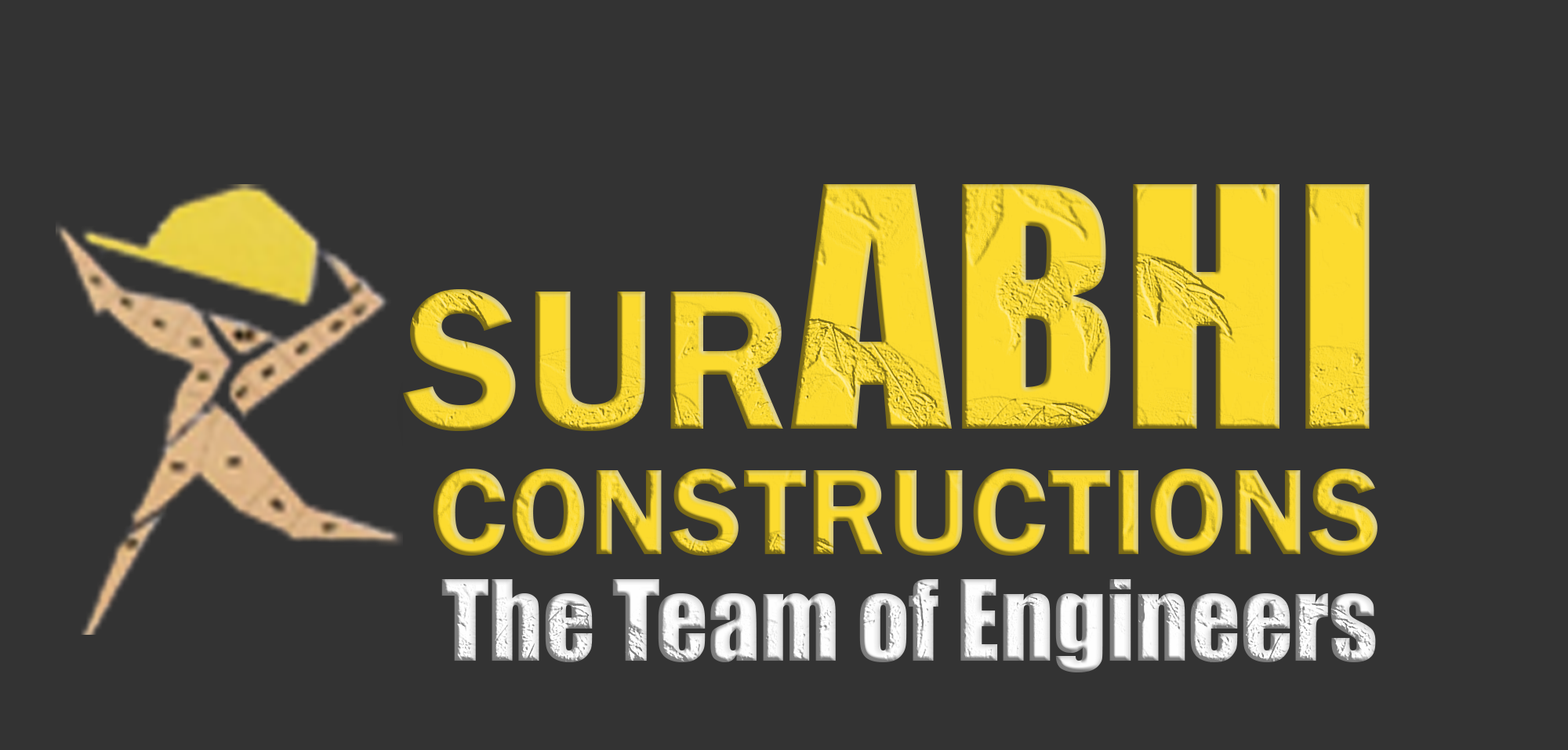
<style>
.page{position:relative;width:1568px;height:750px;background:#333333}
.page>*{position:absolute;margin:0}
.t1{font:309.6px "Impact";color:#fcdb2f}
.t2{font:206.4px "FranklinGothic-Demi";color:#fcdb2f}
.t3{font:126.1px "FranklinGothic-Demi"}
.t4{font:102.5px "Impact"}
</style>
<div class="page">
<p class="t1" style="left:403px;top:184px;width:967px;height:247px"><span class="t2">SUR</span>ABHI</p>
<p class="t3" style="left:433px;top:469px;width:944px;height:87px">CONSTRUCTIONS</p>
<p class="t4" style="left:441px;top:579px;width:935px;height:94px">The Team of Engineers</p>
</div>
